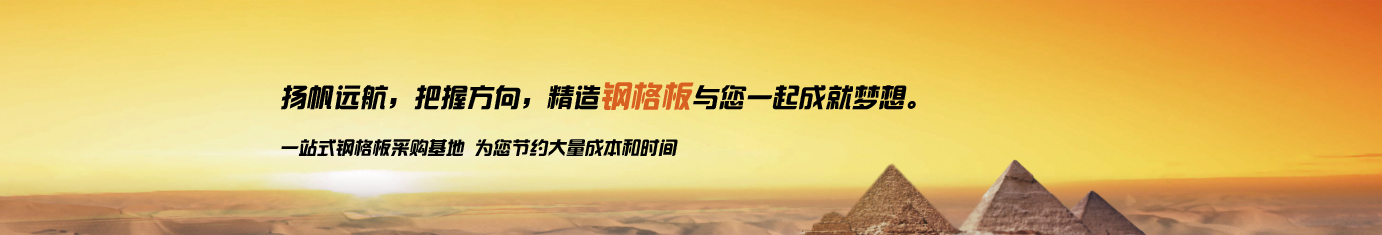
<style>
.page{position:relative;width:1382px;height:235px}
.page>*{position:absolute;margin:0}
.t1{font:26px "¹ã½Ý¾ÓÃÔÄã×Ö¿â";letter-spacing:0.025em;color:#000000;font-style:italic}
.t2{font:30px "¹ã½Ý¾ÓÃÔÄã×Ö¿â";letter-spacing:0.025em;color:#d86021;font-style:italic}
.t3{font:18px "¹ã½Ý¾ÓÃÔÄã×Ö¿â";letter-spacing:0.025em;color:#000000;font-style:italic}
</style>
<div class="page">
<p class="t1" style="left:281px;top:82px;width:635px;height:28px">扬帆远航，把握方向，精造<span class="t2">钢格板</span>与您一起成就梦想。</p>
<p class="t3" style="left:281px;top:139px;width:397px;height:17px">一站式钢格板采购基地 为您节约大量成本和时间</p>
</div>
